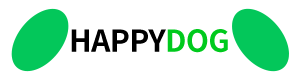
<style>
.page{position:relative;width:300px;height:80px;background:#ffffff}
.page>*{position:absolute;margin:0}
.t1{font:30px "NotoSansKR-Bold";letter-spacing:-0.02em;color:#000000}
.t2{font:30px "NotoSansKR-Bold";letter-spacing:-0.02em;color:#00ca1d}
</style>
<div class="page">
<p class="t1" style="left:71px;top:29px;width:157px;height:24px">HAPPY<span class="t2">DOG</span></p>
</div>
